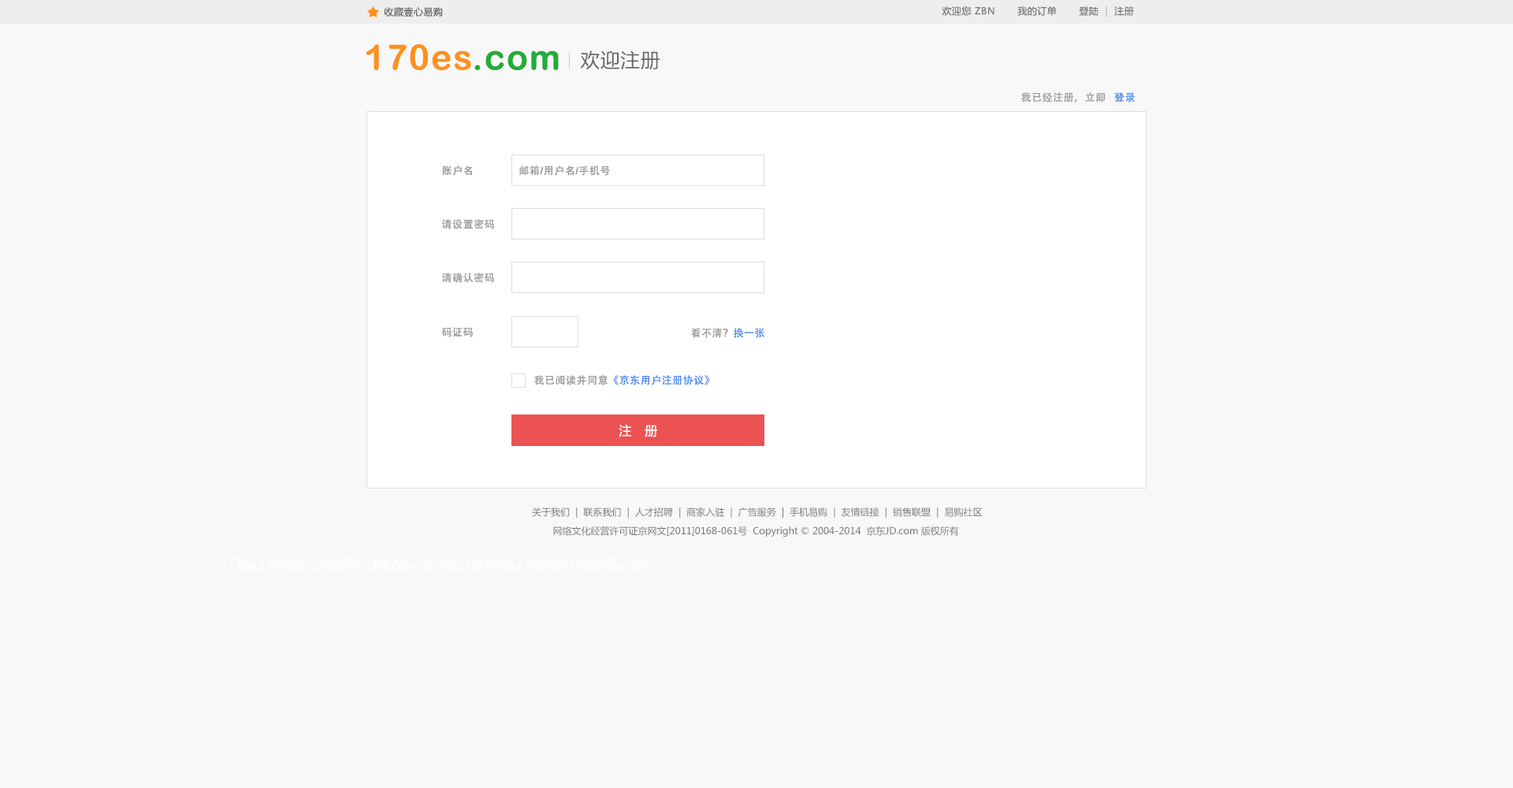
<style>
.page{position:relative;width:1513px;height:788px;background:#f8f8f8}
.page>*{position:absolute;margin:0}
.t1{font:9.5px "MicrosoftYaHei";letter-spacing:0.04em;color:#666666}
.t2{font:9.5px "MicrosoftYaHei";letter-spacing:0.04em;color:#787878}
.t3{font:9.5px "MicrosoftYaHei";letter-spacing:0.04em;color:#bbbbbb}
.t4{font:35.2px "ArialRoundedMTBold";letter-spacing:0.04em;color:#ff911d}
.t5{font:35.2px "ArialRoundedMTBold";letter-spacing:0.04em;color:#22ac38}
.t6{font:19.4px "MicrosoftYaHei";letter-spacing:0.04em;color:#666666}
.t7{font:10.2px "AdobeHeitiStd-Regular";letter-spacing:0.04em;color:#999999}
.t8{font:10.2px "AdobeHeitiStd-Regular";letter-spacing:0.04em;color:#4787ed}
.t9{font:10.2px "ArialRoundedMTBold";letter-spacing:0.04em;color:#999999}
.t10{font:12.6px "MicrosoftYaHei";letter-spacing:0.04em;color:#ffffff}
.t11{font:9.5px "MicrosoftYaHei";color:#787878}
.t12{font:9.5px "MicrosoftYaHei";color:#ffffff}
</style>
<div class="page">
<p class="t1" style="left:384px;top:7px;width:59px;height:10px">收藏壹心易购</p>
<p class="t2" style="left:942px;top:6px;width:192px;height:11px">欢迎您 ZBN       我的订单       登陆  <span class="t3">|</span>  注册</p>
<p class="t4" style="left:366px;top:44px;width:193px;height:26px">170es<span class="t5">.com</span></p>
<p class="t6" style="left:580px;top:50px;width:80px;height:20px">欢迎注册</p>
<p class="t7" style="left:1021px;top:92px;width:114px;height:10px">我已经注册，立即   <span class="t8">登录</span></p>
<p class="t7" style="left:442px;top:165px;width:30px;height:11px">账户名</p>
<p class="t7" style="left:519px;top:165px;width:91px;height:11px">邮箱<span class="t9">/</span>用户名<span class="t9">/</span>手机号</p>
<p class="t7" style="left:442px;top:219px;width:52px;height:10px">请设置密码</p>
<p class="t7" style="left:442px;top:273px;width:52px;height:10px">请确认密码</p>
<p class="t7" style="left:442px;top:327px;width:31px;height:10px">码证码</p>
<p class="t7" style="left:691px;top:328px;width:74px;height:10px">看不清？<span class="t8">换一张</span></p>
<p class="t8" style="left:534px;top:375px;width:176px;height:10px"><span class="t7">我已阅读并同意</span>《京东用户注册协议》</p>
<p class="t10" style="left:619px;top:424px;width:38px;height:13px">注   册</p>
<p class="t11" style="left:532px;top:507px;width:450px;height:11px">关于我们  |  联系我们  |  人才招聘  |  商家入驻  |  广告服务  |  手机易购  |  友情链接  |  销售联盟  |  易购社区</p>
<p class="t11" style="left:553px;top:526px;width:406px;height:11px">网络文化经营许可证京网文[2011]0168-061号  Copyright © 2004-2014  京东JD.com 版权所有</p>
<p class="t12" style="left:218px;top:557px;width:449px;height:11px">关于我们  |  联系我们  |  人才招聘  |  商家入驻  |  广告服务  |  手机易购  |  友情链接  |  销售联盟  |  易购社区</p>
<p class="t12" style="left:239px;top:563px;width:406px;height:11px">网络文化经营许可证京网文[2011]0168-061号  Copyright © 2004-2014  京东JD.com 版权所有</p>
</div>
